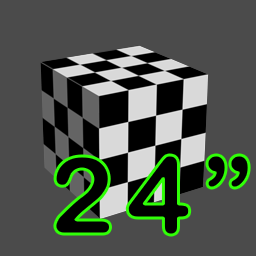
<style>
.page{position:relative;width:256px;height:256px;background:#4b4b4b}
.page>*{position:absolute;margin:0}
.t1{font:106.1px "ArialRoundedMTBold";letter-spacing:0.1em;color:#000000;font-weight:bold}
</style>
<div class="page">
<p class="t1" style="left:54px;top:155px;width:196px;height:80px">24”</p>
</div>
